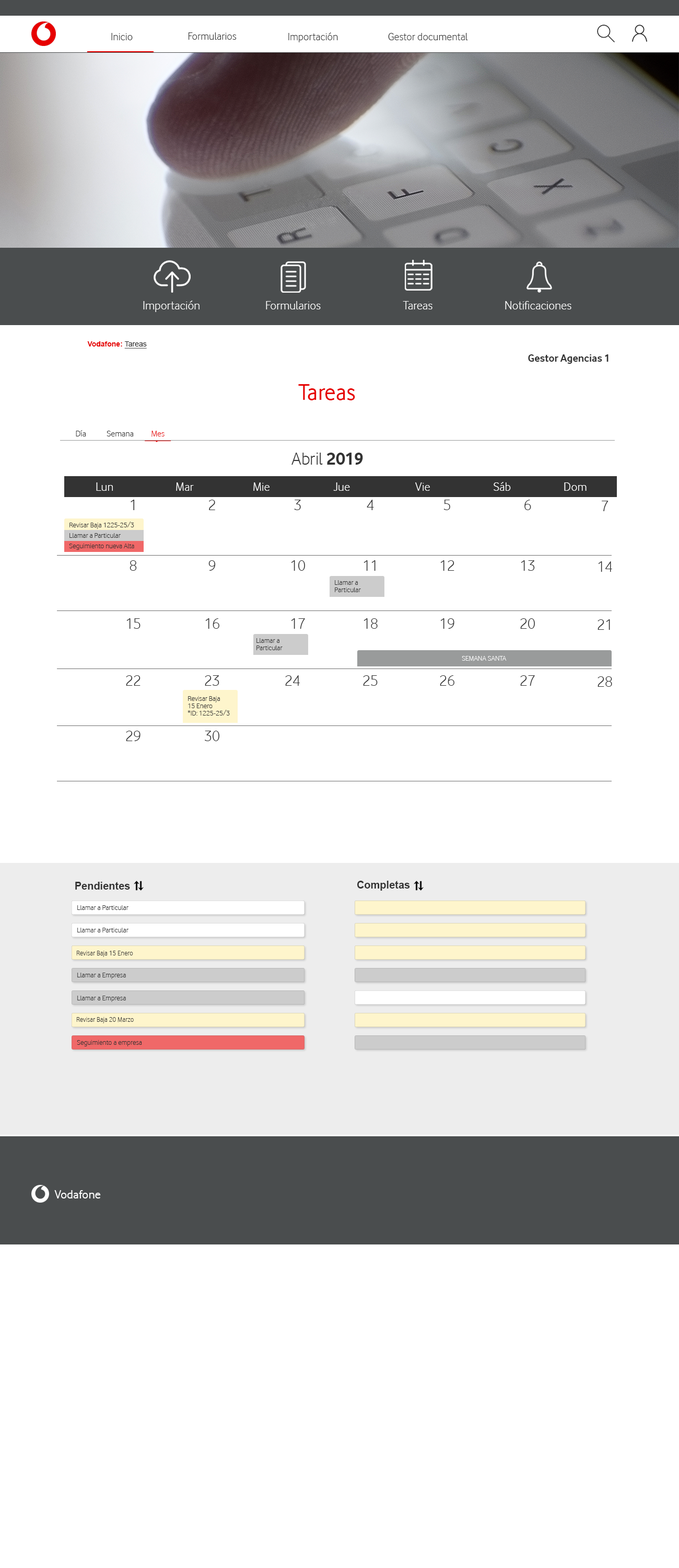
<style>
.page{position:relative;width:679px;height:1568px;background:#ffffff}
.page>*{position:absolute;margin:0}
.t1{font:11px "VodafoneLt-Regular";color:#333333}
.t2{font:12.5px "VodafoneLt-Regular";color:#ffffff}
.t3{font:7.3px "Arial-BoldMT";color:#e60000}
.t4{font:7.3px "ArialMT";color:#333333;text-decoration:underline}
.t5{font:10.9px "VodafoneRg-Bold";color:#333333}
.t6{font:23.5px "VodafoneRg-Regular";color:#e60000}
.t7{font:8.8px "VodafoneLt-Regular";color:#333333}
.t8{font:8.8px "VodafoneLt-Regular";color:#e60000}
.t9{font:18.1px "VodafoneLt-Regular";color:#333333}
.t10{font:18.1px "VodafoneRg-Bold";color:#333333}
.t11{font:12.7px "VodafoneLt-Regular";color:#ffffff}
.t12{font:15.7px "VodafoneLt-Regular";color:#333333}
.t13{font:7.3px "VodafoneLt-Regular";color:#333333}
.t14{font:7.3px/7.3px "VodafoneLt-Regular";color:#333333}
.t15{font:7.3px "VodafoneLt-Regular";color:#ffffff}
.t16{font:10.5px "Arial-BoldMT";color:#333333}
.t17{font:7.3px "VodafoneLt-Regular";color:#333333;scale:0.96 1}
.t18{font:12.5px "VodafoneRg-Regular";color:#ffffff}
</style>
<div class="page">
<p class="t1" style="left:111px;top:33px;width:22px;height:7px">Inicio</p>
<p class="t1" style="left:189px;top:32px;width:48px;height:8px">Formularios</p>
<p class="t1" style="left:289px;top:32px;width:49px;height:10px">Importación</p>
<p class="t1" style="left:388px;top:33px;width:80px;height:7px">Gestor documental</p>
<p class="t2" style="left:143px;top:301px;width:57px;height:11px">Importación</p>
<p class="t2" style="left:266px;top:301px;width:55px;height:8px">Formularios</p>
<p class="t2" style="left:403px;top:301px;width:30px;height:8px">Tareas</p>
<p class="t2" style="left:505px;top:301px;width:67px;height:8px">Notificaciones</p>
<p class="t3" style="left:87px;top:341px;width:60px;height:8px">Vodafone: <span class="t4">Tareas</span></p>
<p class="t5" style="left:528px;top:354px;width:81px;height:10px">Gestor Agencias 1</p>
<p class="t6" style="left:298px;top:384px;width:57px;height:16px">Tareas</p>
<p class="t7" style="left:76px;top:430px;width:10px;height:6px">Día</p>
<p class="t7" style="left:107px;top:431px;width:26px;height:5px">Semana</p>
<p class="t8" style="left:152px;top:431px;width:13px;height:6px">Mes</p>
<p class="t9" style="left:292px;top:453px;width:71px;height:12px">Abril <span class="t10">2019</span></p>
<p class="t11" style="left:96px;top:482px;width:17px;height:9px">Lun</p>
<p class="t11" style="left:176px;top:482px;width:18px;height:9px">Mar</p>
<p class="t11" style="left:253px;top:482px;width:17px;height:9px">Mie</p>
<p class="t11" style="left:333px;top:482px;width:17px;height:9px">Jue</p>
<p class="t11" style="left:416px;top:482px;width:14px;height:9px">Vie</p>
<p class="t11" style="left:494px;top:482px;width:17px;height:9px">Sáb</p>
<p class="t11" style="left:564px;top:482px;width:23px;height:9px">Dom</p>
<p class="t12" style="left:131px;top:500px;width:4px;height:10px">1</p>
<p class="t12" style="left:209px;top:500px;width:6px;height:10px">2</p>
<p class="t12" style="left:294px;top:500px;width:7px;height:10px">3</p>
<p class="t12" style="left:367px;top:500px;width:7px;height:10px">4</p>
<p class="t12" style="left:444px;top:500px;width:7px;height:10px">5</p>
<p class="t12" style="left:525px;top:500px;width:7px;height:10px">6</p>
<p class="t12" style="left:602px;top:501px;width:7px;height:10px">7</p>
<p class="t13" style="left:70px;top:522px;width:64px;height:7px">Revisar Baja 1225-25/3</p>
<p class="t13" style="left:70px;top:533px;width:51px;height:5px">Llamar a Particular</p>
<p class="t13" style="left:69px;top:544px;width:65px;height:6px">Seguimiento nueva Alta</p>
<p class="t12" style="left:130px;top:560px;width:7px;height:11px">8</p>
<p class="t12" style="left:209px;top:560px;width:7px;height:11px">9</p>
<p class="t12" style="left:291px;top:560px;width:14px;height:11px">10</p>
<p class="t12" style="left:364px;top:560px;width:12px;height:11px">11</p>
<p class="t12" style="left:441px;top:560px;width:14px;height:11px">12</p>
<p class="t12" style="left:521px;top:560px;width:14px;height:11px">13</p>
<p class="t12" style="left:598px;top:561px;width:15px;height:11px">14</p>
<p class="t14" style="left:335px;top:580px;width:26px;height:12px">Llamar a<br>Particular</p>
<p class="t12" style="left:126px;top:618px;width:15px;height:11px">15</p>
<p class="t12" style="left:205px;top:618px;width:15px;height:11px">16</p>
<p class="t12" style="left:291px;top:618px;width:14px;height:11px">17</p>
<p class="t12" style="left:364px;top:618px;width:14px;height:11px">18</p>
<p class="t12" style="left:441px;top:618px;width:14px;height:11px">19</p>
<p class="t12" style="left:521px;top:618px;width:14px;height:11px">20</p>
<p class="t12" style="left:598px;top:619px;width:12px;height:11px">21</p>
<p class="t14" style="left:257px;top:638px;width:26px;height:12px">Llamar a<br>Particular</p>
<p class="t15" style="left:462px;top:656px;width:45px;height:5px">SEMANA SANTA</p>
<p class="t12" style="left:126px;top:675px;width:15px;height:11px">22</p>
<p class="t12" style="left:205px;top:675px;width:15px;height:11px">23</p>
<p class="t12" style="left:285px;top:675px;width:15px;height:11px">24</p>
<p class="t12" style="left:363px;top:675px;width:15px;height:11px">25</p>
<p class="t12" style="left:440px;top:675px;width:15px;height:11px">26</p>
<p class="t12" style="left:521px;top:675px;width:14px;height:11px">27</p>
<p class="t12" style="left:598px;top:676px;width:15px;height:11px">28</p>
<p class="t14" style="left:188px;top:696px;width:42px;height:20px">Revisar Baja<br>15 Enero<br>*ID: 1225-25/3</p>
<p class="t12" style="left:126px;top:731px;width:15px;height:10px">29</p>
<p class="t12" style="left:205px;top:731px;width:15px;height:10px">30</p>
<p class="t16" style="left:75px;top:882px;width:55px;height:8px">Pendientes</p>
<p class="t16" style="left:358px;top:881px;width:52px;height:10px">Completas</p>
<p class="t13" style="left:77px;top:905px;width:52px;height:5px">Llamar a Particular</p>
<p class="t13" style="left:77px;top:928px;width:52px;height:4px">Llamar a Particular</p>
<p class="t17" style="left:76px;top:951px;width:57px;height:6px">Revisar Baja 15 Enero</p>
<p class="t13" style="left:77px;top:973px;width:49px;height:6px">Llamar a Empresa</p>
<p class="t13" style="left:77px;top:996px;width:49px;height:6px">Llamar a Empresa</p>
<p class="t17" style="left:76px;top:1017px;width:58px;height:6px">Revisar Baja 20 Marzo</p>
<p class="t13" style="left:77px;top:1040px;width:65px;height:6px">Seguimiento a empresa</p>
<p class="t18" style="left:54px;top:1190px;width:47px;height:8px">Vodafone</p>
</div>
